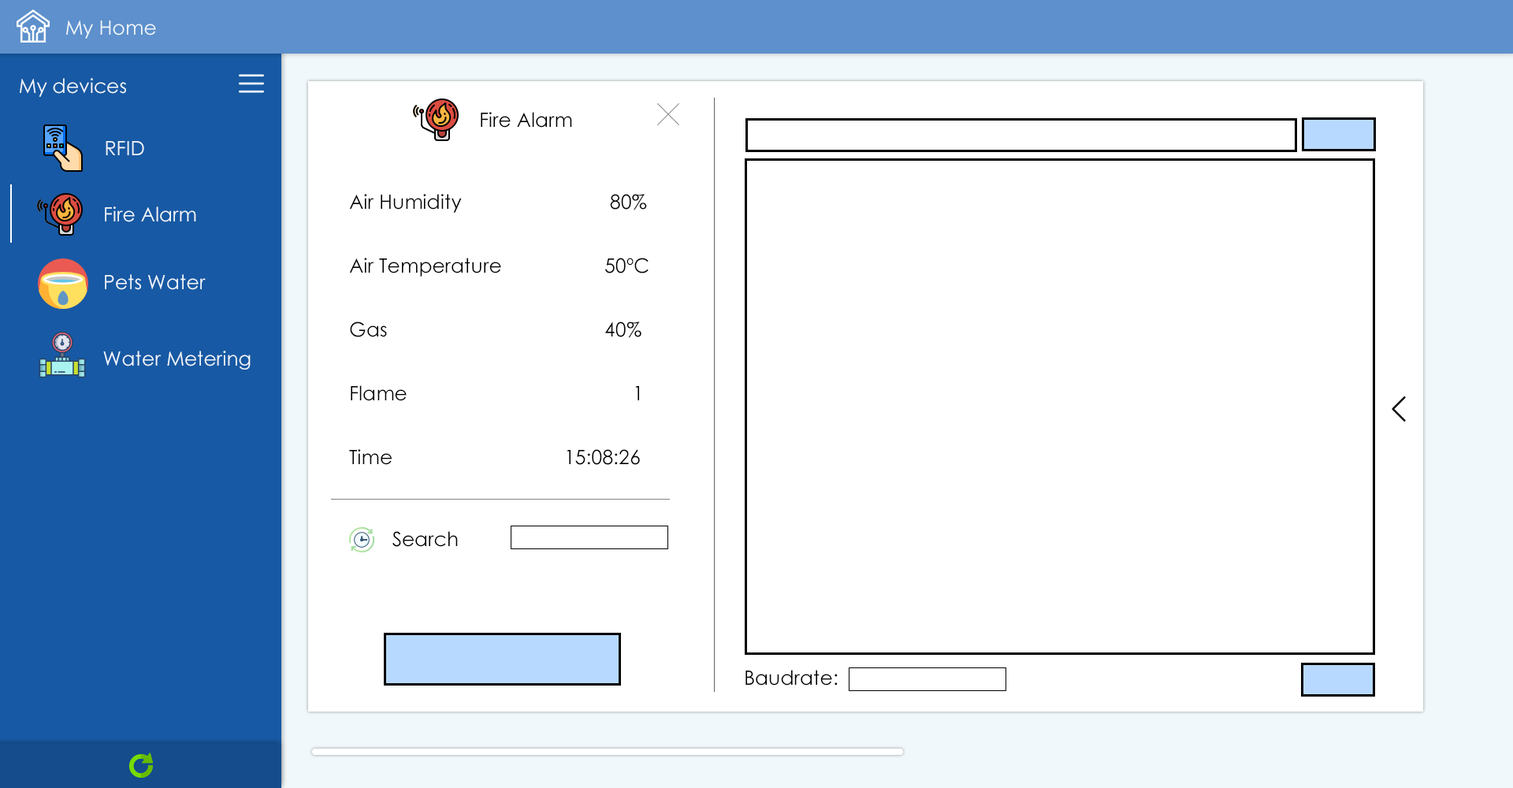
<style>
.page{position:relative;width:1513px;height:788px;background:#ffffff}
.page>*{position:absolute;margin:0}
.t1{font:19.7px "CenturyGothic";color:#f0f7fb}
.t2{font:19.7px "CenturyGothic";color:#000101}
.t3{font:19.7px/63px "CenturyGothic";color:#000000}
.t4{font:19.7px "CenturyGothic";color:#000000}
</style>
<div class="page">
<p class="t1" style="left:66px;top:20px;width:90px;height:19px">My Home</p>
<p class="t1" style="left:20px;top:78px;width:106px;height:19px">My devices</p>
<p class="t2" style="left:481px;top:112px;width:91px;height:16px">Fire Alarm</p>
<p class="t1" style="left:106px;top:141px;width:38px;height:14px">RFID</p>
<p class="t3" style="left:349px;top:194px;width:300px;height:271px">Air Humidity       80%<br>Air Temperature    50ºC<br>Gas        40%<br>Flame        1<br>Time         15:08:26</p>
<p class="t1" style="left:105px;top:206px;width:91px;height:16px">Fire Alarm</p>
<p class="t1" style="left:105px;top:274px;width:101px;height:16px">Pets Water</p>
<p class="t1" style="left:103px;top:351px;width:148px;height:19px">Water Metering</p>
<p class="t4" style="left:392px;top:531px;width:66px;height:16px">Search</p>
<p class="t4" style="left:746px;top:670px;width:92px;height:16px">Baudrate:</p>
</div>
